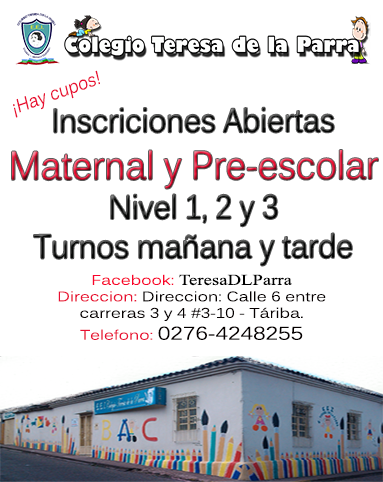
<style>
.page{position:relative;width:383px;height:482px;background:#ffffff}
.page>*{position:absolute;margin:0}
.t1{font:18.7px "Kalinga";color:#e90f33;scale:0.88 1}
.t2{font:32.8px "Kalinga";scale:0.88 1}
.t3{font:39.3px "Kalinga";scale:0.88 1}
.t4{font:13.7px "Kalinga";color:#050000;scale:1.23 1}
.t5{font:13.7px "Kalinga";color:#f9032b;scale:1.23 1}
.t6{font:15.2px "TimesNewRomanPSMT";color:#000000;scale:1.23 1}
.t7{font:13.7px "Kalinga";color:#e90f33;scale:1.23 1}
.t8{font:18.3px "Kalinga";color:#050000;scale:1.23 1}
</style>
<div class="page">
<p class="t1" style="left:13px;top:70px;width:87px;height:48px;rotate:-20deg">¡Hay cupos!</p>
<p class="t2" style="left:12px;top:107px;width:366px;height:159px;text-align:center">Inscriciones Abiertas<br><span class="t3">Maternal y Pre-escolar</span><br>Nivel 1, 2 y 3<br>Turnos mañana y tarde</p>
<p class="t4" style="left:58px;top:274px;width:268px;height:66px;text-align:center"><span class="t5">Facebook: </span><span class="t6">TeresaDLParra<br></span><span class="t7">Direccion:</span> Direccion: Calle 6 entre <br>carreras 3 y 4 #3-10 - Táriba.<br><span class="t7">Telefono: </span><span class="t8">0276-4248255</span></p>
</div>
